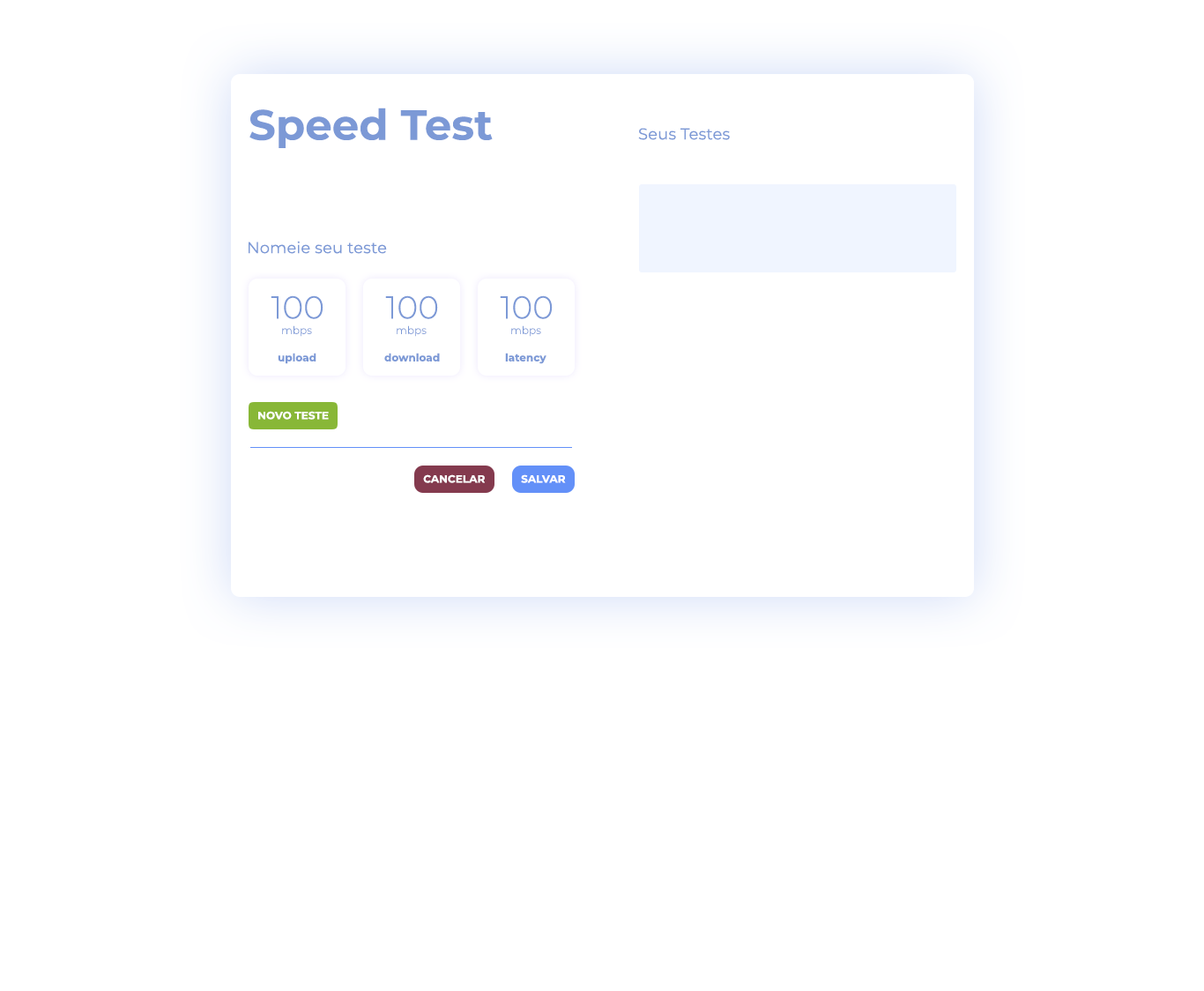
<style>
.page{position:relative;width:1204px;height:991px;background:#ffffff}
.page>*{position:absolute;margin:0}
.t1{font:42.3px "Montserrat-Bold";letter-spacing:0.005em;color:#7c99d6}
.t2{font:15.9px "Montserrat-Regular";letter-spacing:0.005em;color:#7c99d6}
.t3{font:31.7px "Montserrat-Light";letter-spacing:0.005em;color:#7c99d6}
.t4{font:10.6px "Montserrat-Light";letter-spacing:0.005em;color:#7c99d6}
.t5{font:10.6px "Montserrat-Bold";letter-spacing:0.005em;color:#7c99d6}
.t6{font:10.6px "Montserrat-Bold";letter-spacing:0.005em;color:#ffffff}
</style>
<div class="page">
<p class="t1" style="left:249px;top:108px;width:244px;height:40px">Speed Test</p>
<p class="t2" style="left:638px;top:128px;width:92px;height:12px">Seus Testes</p>
<p class="t2" style="left:249px;top:241px;width:138px;height:13px">Nomeie seu teste</p>
<p class="t3" style="left:271px;top:295px;width:52px;height:24px">100</p>
<p class="t3" style="left:385px;top:295px;width:53px;height:24px">100</p>
<p class="t3" style="left:500px;top:295px;width:53px;height:24px">100</p>
<p class="t4" style="left:282px;top:325px;width:30px;height:12px">mbps</p>
<p class="t4" style="left:397px;top:325px;width:30px;height:12px">mbps</p>
<p class="t4" style="left:511px;top:325px;width:30px;height:12px">mbps</p>
<p class="t5" style="left:278px;top:353px;width:38px;height:11px">upload</p>
<p class="t5" style="left:384px;top:353px;width:56px;height:8px">download</p>
<p class="t5" style="left:505px;top:353px;width:41px;height:11px">latency</p>
<p class="t6" style="left:258px;top:411px;width:71px;height:8px">NOVO TESTE</p>
<p class="t6" style="left:423px;top:474px;width:62px;height:9px">CANCELAR</p>
<p class="t6" style="left:521px;top:474px;width:45px;height:9px">SALVAR</p>
</div>
